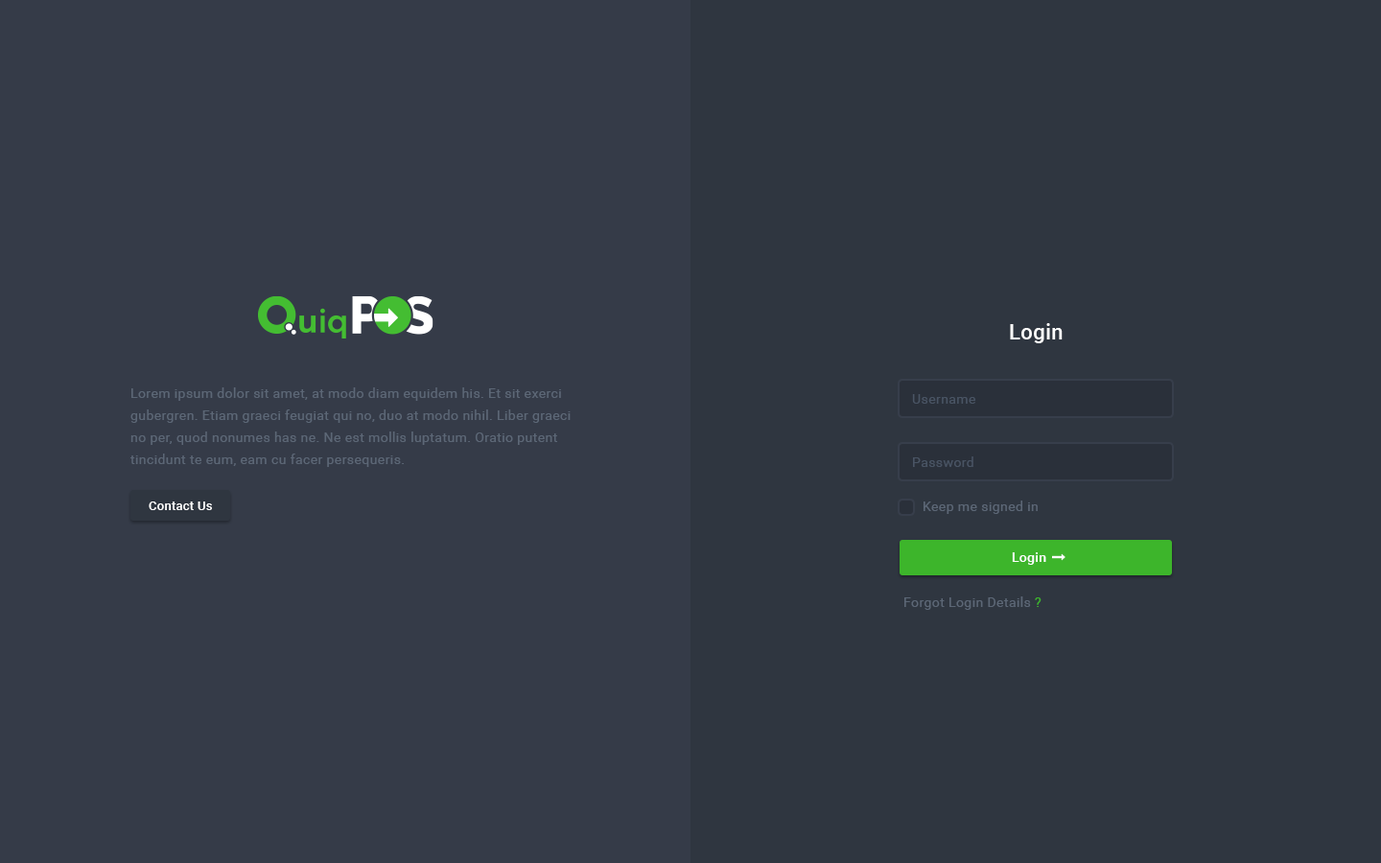
<style>
.page{position:relative;width:1381px;height:863px;background:#353b48}
.page>*{position:absolute;margin:0}
.t1{font:21.1px "Roboto-Medium";letter-spacing:0.02em;color:#ffffff}
.t2{font:13.4px/22.1px "Roboto-Regular";letter-spacing:0.03em;color:#5c6776}
.t3{font:13.4px "Roboto-Regular";letter-spacing:0.03em;color:#495464}
.t4{font:12.5px "Roboto-Medium";letter-spacing:0.02em;color:#ffffff}
.t5{font:13.4px "Roboto-Regular";letter-spacing:0.03em;color:#5c6776}
.t6{font:13.4px "Roboto-Medium";letter-spacing:0.02em;color:#ffffff}
.t7{font:13.4px "Roboto-Regular";letter-spacing:0.03em;color:#3db52b}
</style>
<div class="page">
<p class="t1" style="left:1010px;top:323px;width:53px;height:20px">Login</p>
<p class="t2" style="left:130px;top:388px;width:441px;height:79px">Lorem ipsum dolor sit amet, at modo diam equidem his. Et sit exerci gubergren. Etiam graeci feugiat qui no, duo at modo nihil. Liber graeci no per, quod nonumes has ne. Ne est mollis luptatum. Oratio putent tincidunt te eum, eam cu facer persequeris.</p>
<p class="t3" style="left:912px;top:394px;width:64px;height:10px">Username</p>
<p class="t3" style="left:913px;top:457px;width:61px;height:10px">Password</p>
<p class="t4" style="left:149px;top:502px;width:63px;height:8px">Contact Us</p>
<p class="t5" style="left:924px;top:501px;width:114px;height:13px">Keep me signed in</p>
<p class="t6" style="left:1012px;top:553px;width:34px;height:12px">Login</p>
<p class="t5" style="left:905px;top:597px;width:137px;height:13px">Forgot Login Details <span class="t7">?</span></p>
</div>
